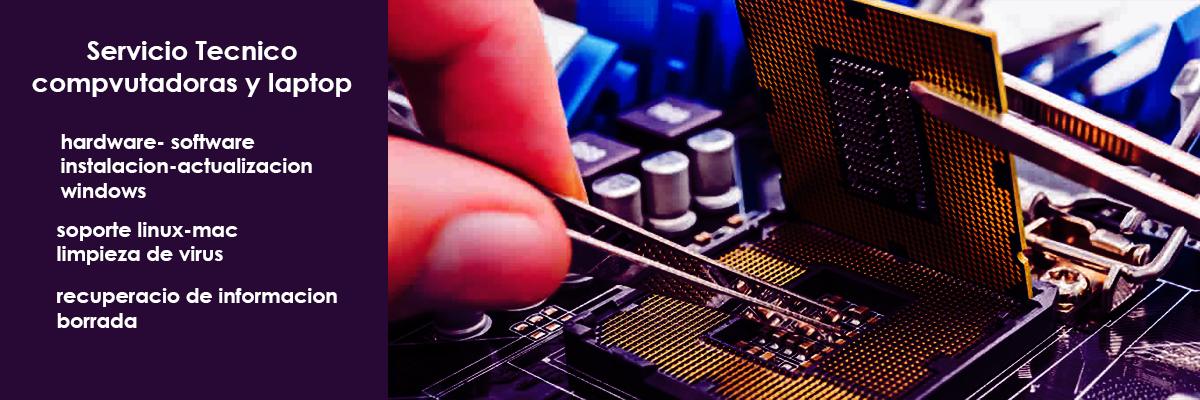
<style>
.page{position:relative;width:1200px;height:400px;background:#280935}
.page>*{position:absolute;margin:0}
.t1{font:26.7px "CenturyGothic-Bold";color:#ffffff}
.t2{font:20.6px "CenturyGothic-Bold";color:#ffffff}
</style>
<div class="page">
<p class="t1" style="left:32px;top:41px;width:320px;height:56px;text-align:center">Servicio Tecnico<br>compvutadoras y laptop</p>
<p class="t2" style="left:60px;top:134px;width:252px;height:64px">hardware- software<br>instalacion-actualizacion<br>windows</p>
<p class="t2" style="left:57px;top:222px;width:181px;height:43px">soporte linux-mac<br>limpieza de virus</p>
<p class="t2" style="left:57px;top:288px;width:280px;height:40px">recuperacio de informacion<br>borrada</p>
</div>
